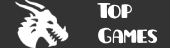
<style>
.page{position:relative;width:170px;height:48px;background:#333333}
.page>*{position:absolute;margin:0}
.t1{font:21.6px "Launica";color:#ffffff}
</style>
<div class="page">
<p class="t1" style="left:97px;top:3px;width:61px;height:41px">Top<br>Games</p>
</div>
